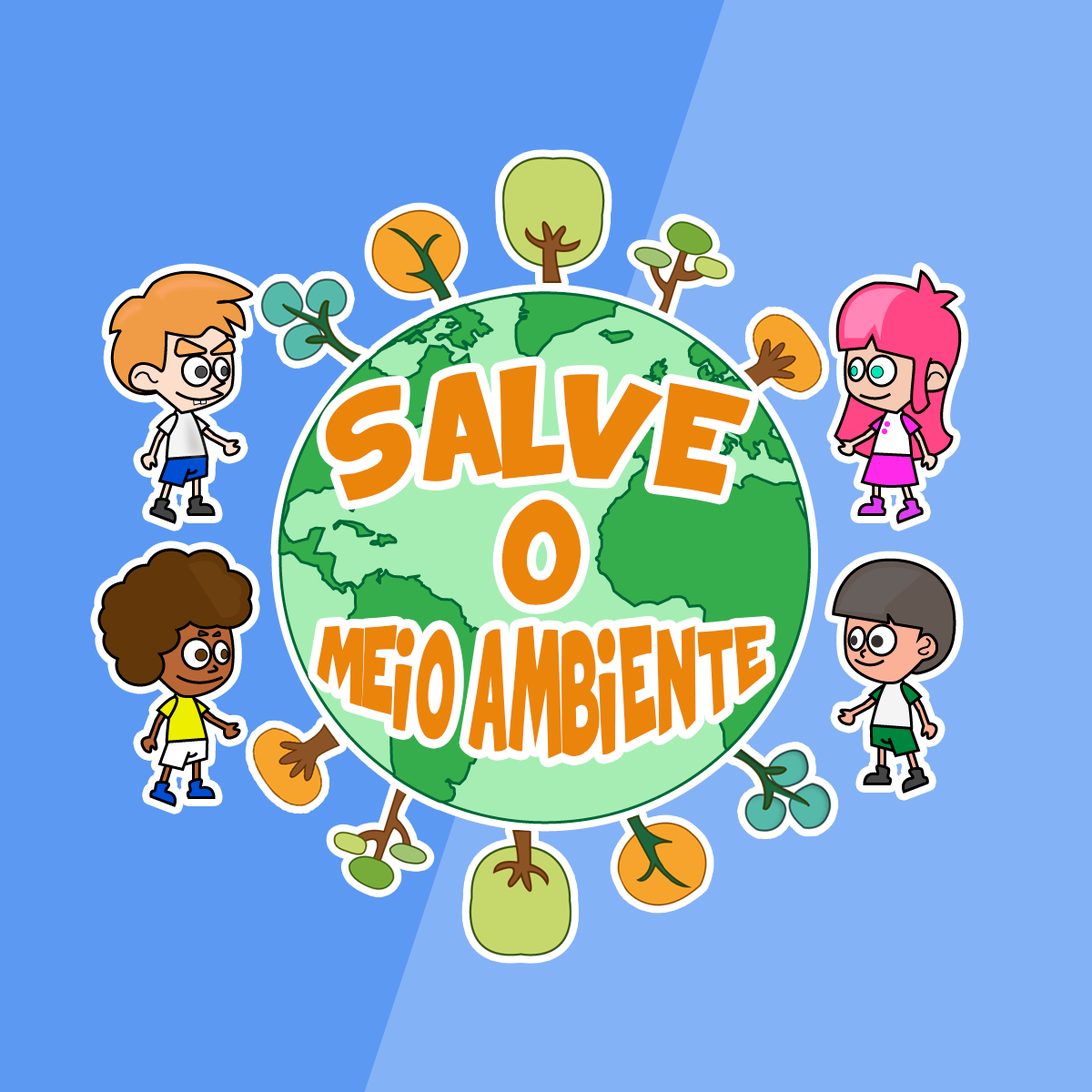
<style>
.page{position:relative;width:1092px;height:1092px;background:#84b2f7}
.page>*{position:absolute;margin:0}
.t1{font:71.4px "ComixLoud";color:#eb840a}
.t2{font:33.7px "ComixLoud";color:#eb840a}
</style>
<div class="page">
<p class="t1" style="left:325px;top:365px;width:425px;height:136px">SALVE</p>
<p class="t1" style="left:501px;top:500px;width:80px;height:105px">0</p>
<p class="t2" style="left:317px;top:625px;width:449px;height:134px">MEIO AMBIENTE</p>
</div>
